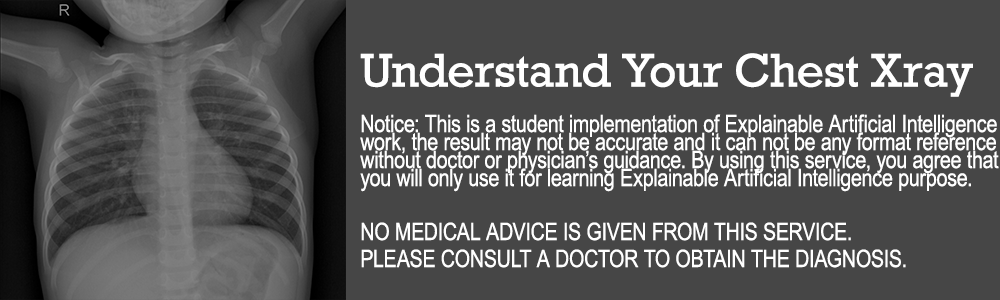
<style>
.page{position:relative;width:1000px;height:300px;background:#464646}
.page>*{position:absolute;margin:0}
.t1{font:48px "Rockwell";letter-spacing:-0.005em;color:#ffffff}
.t2{font:24px/9px "ArialNarrow";letter-spacing:-0.005em;color:#ffffff}
</style>
<div class="page">
<p class="t1" style="left:360px;top:53px;width:613px;height:44px">Understand Your Chest Xray</p>
<p class="t2" style="left:360px;top:114px;width:639px;height:154px">Notice: This is a student implementation of Explainable Artificial Intelligence<br><br>work, the result may not be accurate and it can not be any format reference<br><br>without doctor or physician’s guidance. By using this service, you agree that<br><br>you will only use it for learning Explainable Artificial Intelligence purpose.<br><br><br><br><br><br>NO MEDICAL ADVICE IS GIVEN FROM THIS SERVICE.<br><br><br>PLEASE CONSULT A DOCTOR TO OBTAIN THE DIAGNOSIS.</p>
</div>
